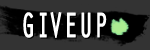
<style>
.page{position:relative;width:150px;height:50px;background:#333333}
.page>*{position:absolute;margin:0}
.t1{font:36px "OratorStd";color:#ffffff;font-weight:bold;scale:0.67 1}
.t2{font:36px "OratorStd";letter-spacing:-0.1em;color:#ffffff;font-weight:bold;scale:0.67 1}
</style>
<div class="page">
<p class="t1" style="left:23px;top:12px;width:84px;height:26px">G<span class="t2">I</span>VEUP</p>
</div>
